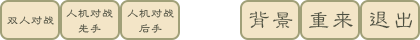
<style>
.page{position:relative;width:420px;height:40px;background:#f3e5c7}
.page>*{position:absolute;margin:0}
.t1{font:12px "STLibianSC-Regular"}
.t2{font:12px/15px "STLibianSC-Regular"}
.t3{font:24px "STLibianSC-Regular";color:#4c4f40}
</style>
<div class="page">
<p class="t1" style="left:7px;top:16px;width:47px;height:9px">双人对战</p>
<p class="t2" style="left:66px;top:9px;width:47px;height:24px;text-align:center">人机对战<br>先手</p>
<p class="t2" style="left:127px;top:9px;width:47px;height:24px;text-align:center">人机对战<br>后手</p>
<p class="t3" style="left:249px;top:11px;width:44px;height:18px">背景</p>
<p class="t3" style="left:309px;top:11px;width:44px;height:17px">重来</p>
<p class="t3" style="left:370px;top:11px;width:42px;height:18px">退出</p>
</div>
